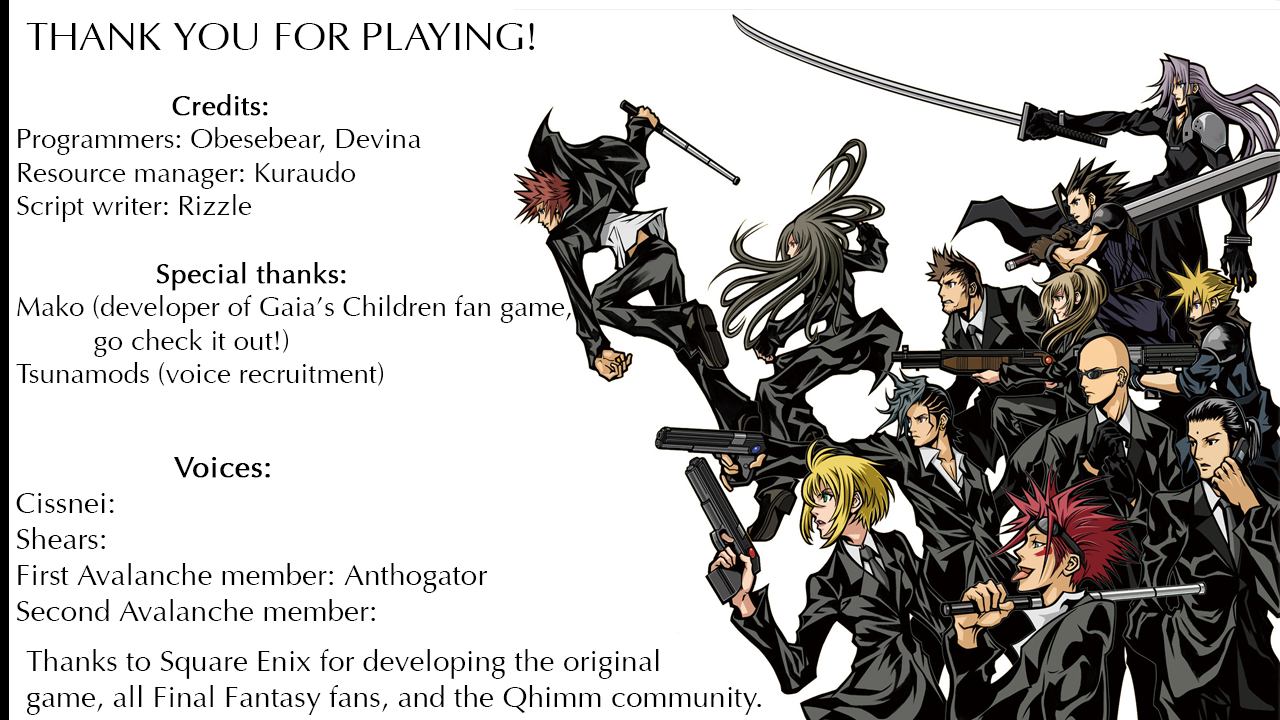
<style>
.page{position:relative;width:1280px;height:720px;background:#ffffff}
.page>*{position:absolute;margin:0}
.t1{font:40px "OptimaPlain";color:#000000}
.t2{font:28px "OptimaPlain";color:#000000}
.t3{font:28px "OptimaPlain";color:#000000;font-weight:bold}
.t4{font:30px "OptimaPlain";color:#000000}
.t5{font:30px "OptimaPlain";color:#000000;font-weight:bold}
</style>
<div class="page">
<p class="t1" style="left:26px;top:23px;width:509px;height:27px">THANK YOU FOR PLAYING!</p>
<p class="t2" style="left:16px;top:94px;width:555px;height:292px;text-align:center"><span class="t3">                  Credits:<br></span>Programmers: Obesebear, Devina<br>Resource manager: Kuraudo<br>Script writer: Rizzle<br><br>                  <span class="t3">Special thanks:<br></span>Mako (developer of Gaia’s Children fan game,<br>          go check it out!)<br>Tsunamods (voice recruitment)</p>
<p class="t4" style="left:16px;top:457px;width:472px;height:164px"><span class="t5">Voices:<br></span>Cissnei:<br>Shears:<br>First Avalanche member: Anthogator<br>Second Avalanche member:</p>
<p class="t4" style="left:26px;top:649px;width:735px;height:66px">Thanks to Square Enix for developing the original<br>game, all Final Fantasy fans, and the Qhimm community.</p>
</div>
